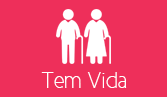
<style>
.page{position:relative;width:167px;height:97px;background:#ee2f5a}
.page>*{position:absolute;margin:0}
.t1{font:22.7px "CicleFina";color:#ffffff}
</style>
<div class="page">
<p class="t1" style="left:41px;top:72px;width:86px;height:16px">Tem Vida</p>
</div>
